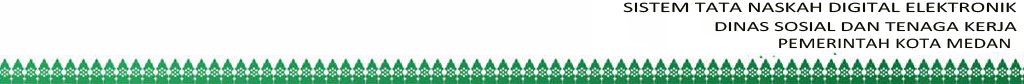
<style>
.page{position:relative;width:1024px;height:84px;background:#fefefe}
.page>*{position:absolute;margin:0}
.t1{font:14.4px "Calibri";color:#0d0c06;scale:1.54 1}
.t2{font:14px "Calibri";color:#0d0c06;scale:1.55 1}
.t3{font:14.4px "Calibri";color:#0d0c06;scale:1.43 1}
</style>
<div class="page">
<p class="t1" style="left:623px;top:2px;width:393px;height:11px">SISTEM TATA NASKAH DIGITAL ELEKTRONIK</p>
<p class="t2" style="left:715px;top:21px;width:302px;height:11px">DINAS SOSIAL DAN TENAGA KERJA</p>
<p class="t3" style="left:779px;top:38px;width:231px;height:11px">PEMERINTAH KOTA MEDAN</p>
</div>
